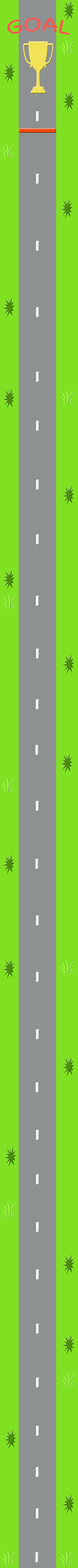
<style>
.page{position:relative;width:78px;height:1568px;background:#8d9192}
.page>*{position:absolute;margin:0}
.t1{font:19.6px "Chalkboard";color:#fc5951}
</style>
<div class="page">
<p class="t1" style="left:7px;top:17px;width:63px;height:18px">GOAL</p>
</div>
